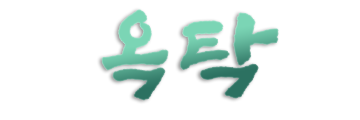
<style>
.page{position:relative;width:360px;height:120px;background:#ffffff}
.page>*{position:absolute;margin:0}
.t1{font:100.2px "SangSangRockOTF";letter-spacing:0.12em}
.t2{font:106.2px "SangSangRockOTF";letter-spacing:0.12em}
</style>
<div class="page">
<p class="t1" style="left:102px;top:10px;width:176px;height:90px">옥<span class="t2">탁</span></p>
</div>
